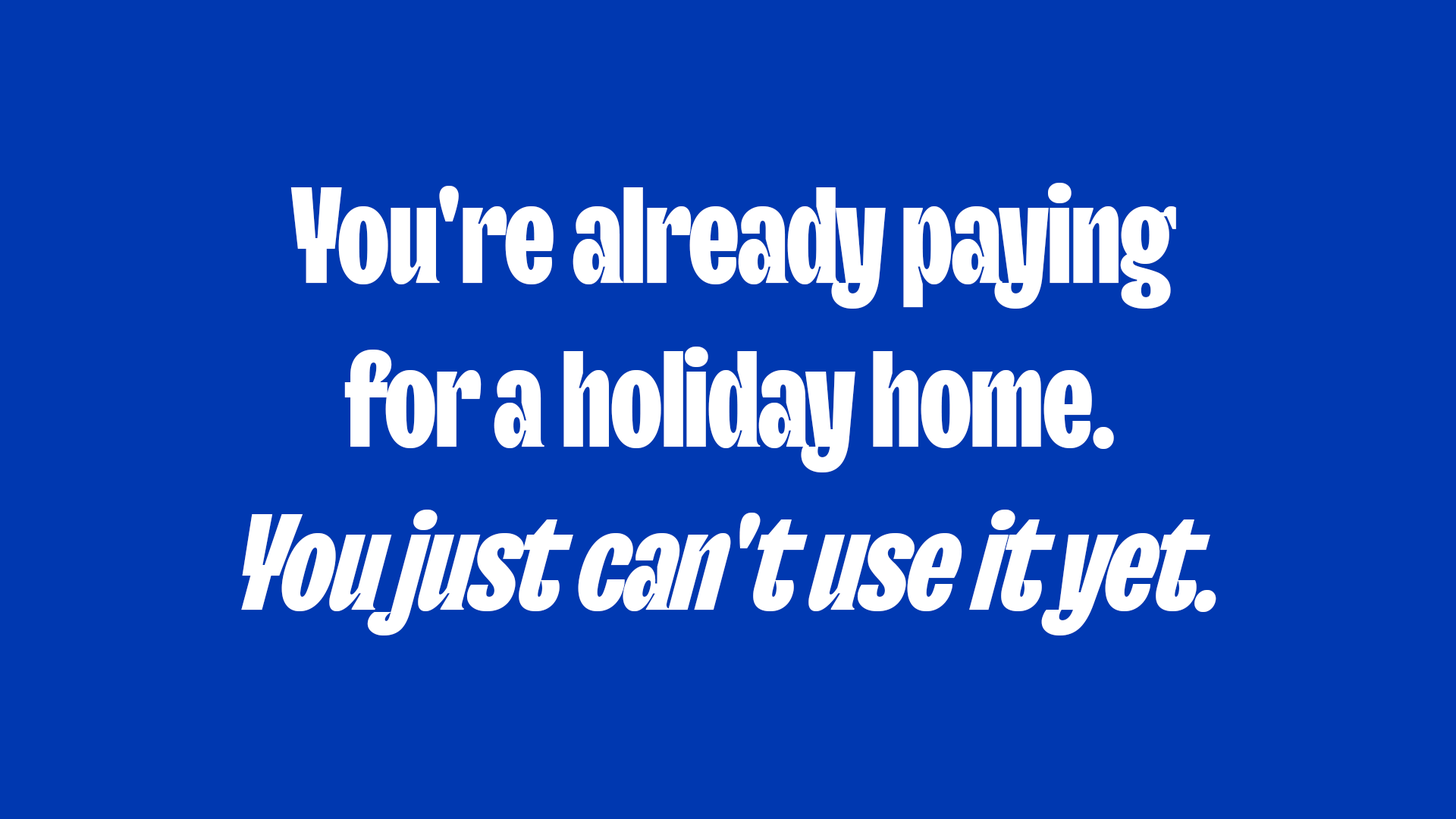
<style>
.page{position:relative;width:1456px;height:819px;background:#0038b0}
.page>*{position:absolute;margin:0}
.t1{font:136.4px "TTTrailersTrial-Blk";letter-spacing:-0.02em;color:#ffffff}
.t2{font:136.4px "TTTrailersTrial-BlkIt";letter-spacing:-0.02em;color:#ffffff}
</style>
<div class="page">
<p class="t1" style="left:241px;top:183px;width:975px;height:452px;text-align:center">You're already paying<br>for a holiday home.<br><span class="t2">You just can't use it yet.</span></p>
</div>
